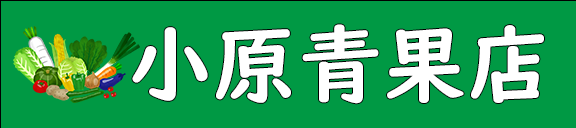
<style>
.page{position:relative;width:576px;height:128px;background:#009944}
.page>*{position:absolute;margin:0}
.t1{font:84.6px "UDDigiKyokashoNP-B";color:#ffffff}
</style>
<div class="page">
<p class="t1" style="left:132px;top:24px;width:412px;height:80px">小原青果店</p>
</div>
